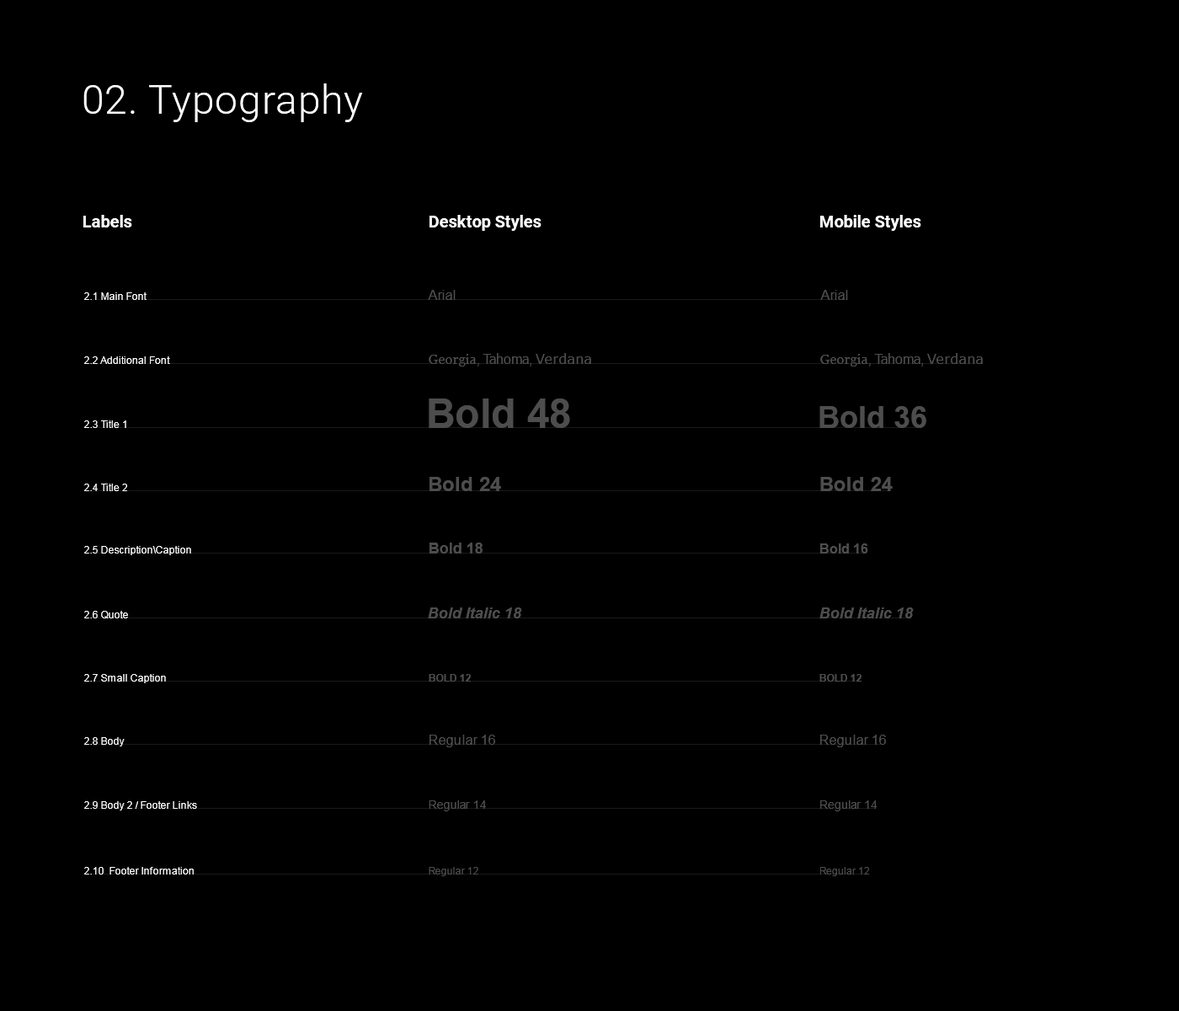
<style>
.page{position:relative;width:1179px;height:1011px;background:#000000}
.page>*{position:absolute;margin:0}
.t1{font:40.4px "Roboto-Light";letter-spacing:0.02em;color:#ffffff}
.t2{font:16.8px "Roboto-Bold";color:#ffffff}
.t3{font:10.1px "ArialMT";color:#ffffff}
.t4{font:13.5px "ArialMT";color:#4d4d4d}
.t5{font:13.5px "Georgia";color:#4d4d4d}
.t6{font:13.5px "Tahoma";color:#4d4d4d}
.t7{font:13.5px "Verdana";color:#4d4d4d}
.t8{font:40.4px "Arial-BoldMT";color:#4d4d4d}
.t9{font:30.3px "Arial-BoldMT";color:#4d4d4d}
.t10{font:20.2px "Arial-BoldMT";color:#4d4d4d}
.t11{font:15.2px "Arial-BoldMT";color:#4d4d4d}
.t12{font:13.5px "Arial-BoldMT";color:#4d4d4d}
.t13{font:15.2px "Arial-BoldItalicMT";color:#4d4d4d}
.t14{font:10.1px "Arial-BoldMT";color:#4d4d4d;text-transform:uppercase}
.t15{font:11.8px "ArialMT";color:#4d4d4d}
.t16{font:10.1px "ArialMT";color:#4d4d4d}
</style>
<div class="page">
<p class="t1" style="left:83px;top:83px;width:280px;height:39px">02. Typography</p>
<p class="t2" style="left:83px;top:215px;width:49px;height:12px">Labels</p>
<p class="t2" style="left:430px;top:215px;width:112px;height:16px">Desktop Styles</p>
<p class="t2" style="left:821px;top:215px;width:101px;height:16px">Mobile Styles</p>
<p class="t3" style="left:84px;top:292px;width:63px;height:8px">2.1 Main Font</p>
<p class="t4" style="left:428px;top:290px;width:28px;height:10px">Arial</p>
<p class="t4" style="left:821px;top:290px;width:27px;height:10px">Arial</p>
<p class="t5" style="left:429px;top:353px;width:162px;height:13px">Georgia<span class="t4">, </span><span class="t6">Tahoma</span><span class="t4">, </span><span class="t7">Verdana</span></p>
<p class="t5" style="left:821px;top:353px;width:162px;height:13px">Georgia<span class="t4">, </span><span class="t6">Tahoma</span><span class="t4">, </span><span class="t7">Verdana</span></p>
<p class="t3" style="left:84px;top:356px;width:86px;height:8px">2.2 Additional Font</p>
<p class="t8" style="left:429px;top:398px;width:141px;height:30px">Bold 48</p>
<p class="t9" style="left:820px;top:406px;width:107px;height:22px">Bold 36</p>
<p class="t3" style="left:84px;top:420px;width:42px;height:8px">2.3 Title 1</p>
<p class="t3" style="left:84px;top:484px;width:43px;height:7px">2.4 Title 2</p>
<p class="t10" style="left:430px;top:477px;width:71px;height:14px">Bold 24</p>
<p class="t10" style="left:821px;top:477px;width:72px;height:14px">Bold 24</p>
<p class="t3" style="left:84px;top:546px;width:107px;height:9px">2.5 Description\Caption</p>
<p class="t11" style="left:430px;top:543px;width:53px;height:11px">Bold 18</p>
<p class="t12" style="left:821px;top:543px;width:48px;height:11px">Bold 16</p>
<p class="t3" style="left:84px;top:611px;width:44px;height:7px">2.6 Quote</p>
<p class="t13" style="left:428px;top:607px;width:94px;height:11px">Bold Italic 18</p>
<p class="t13" style="left:820px;top:607px;width:94px;height:11px">Bold Italic 18</p>
<p class="t3" style="left:84px;top:674px;width:82px;height:9px">2.7 Small Caption</p>
<p class="t14" style="left:429px;top:674px;width:42px;height:8px">Bold 12</p>
<p class="t14" style="left:820px;top:674px;width:42px;height:8px">Bold 12</p>
<p class="t3" style="left:84px;top:737px;width:41px;height:9px">2.8 Body</p>
<p class="t4" style="left:430px;top:735px;width:65px;height:12px">Regular 16</p>
<p class="t4" style="left:821px;top:735px;width:65px;height:12px">Regular 16</p>
<p class="t3" style="left:84px;top:801px;width:113px;height:9px">2.9 Body 2 / Footer Links</p>
<p class="t15" style="left:429px;top:800px;width:57px;height:11px">Regular 14</p>
<p class="t15" style="left:821px;top:800px;width:57px;height:11px">Regular 14</p>
<p class="t3" style="left:84px;top:867px;width:110px;height:7px">2.10  Footer Information</p>
<p class="t16" style="left:429px;top:867px;width:50px;height:9px">Regular 12</p>
<p class="t16" style="left:821px;top:867px;width:48px;height:9px">Regular 12</p>
</div>
